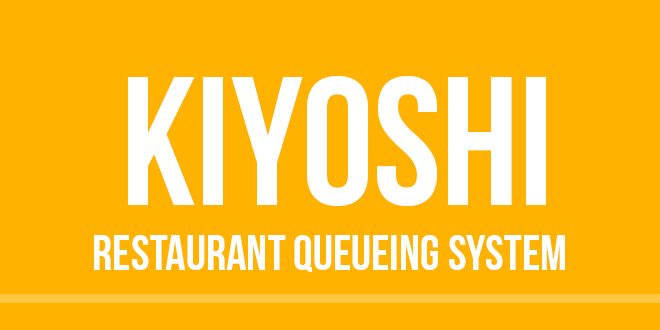
<style>
.page{position:relative;width:660px;height:330px;background:#ffb300}
.page>*{position:absolute;margin:0}
.t1{font:182.8px "BebasNeue";color:#ffffff}
.t2{font:50px "BebasNeue";color:#ffffff}
</style>
<div class="page">
<p class="t1" style="left:128px;top:76px;width:418px;height:130px">KIYOSHI</p>
<p class="t2" style="left:94px;top:235px;width:471px;height:37px">RESTAURANT QUEUEING SYSTEM</p>
</div>
